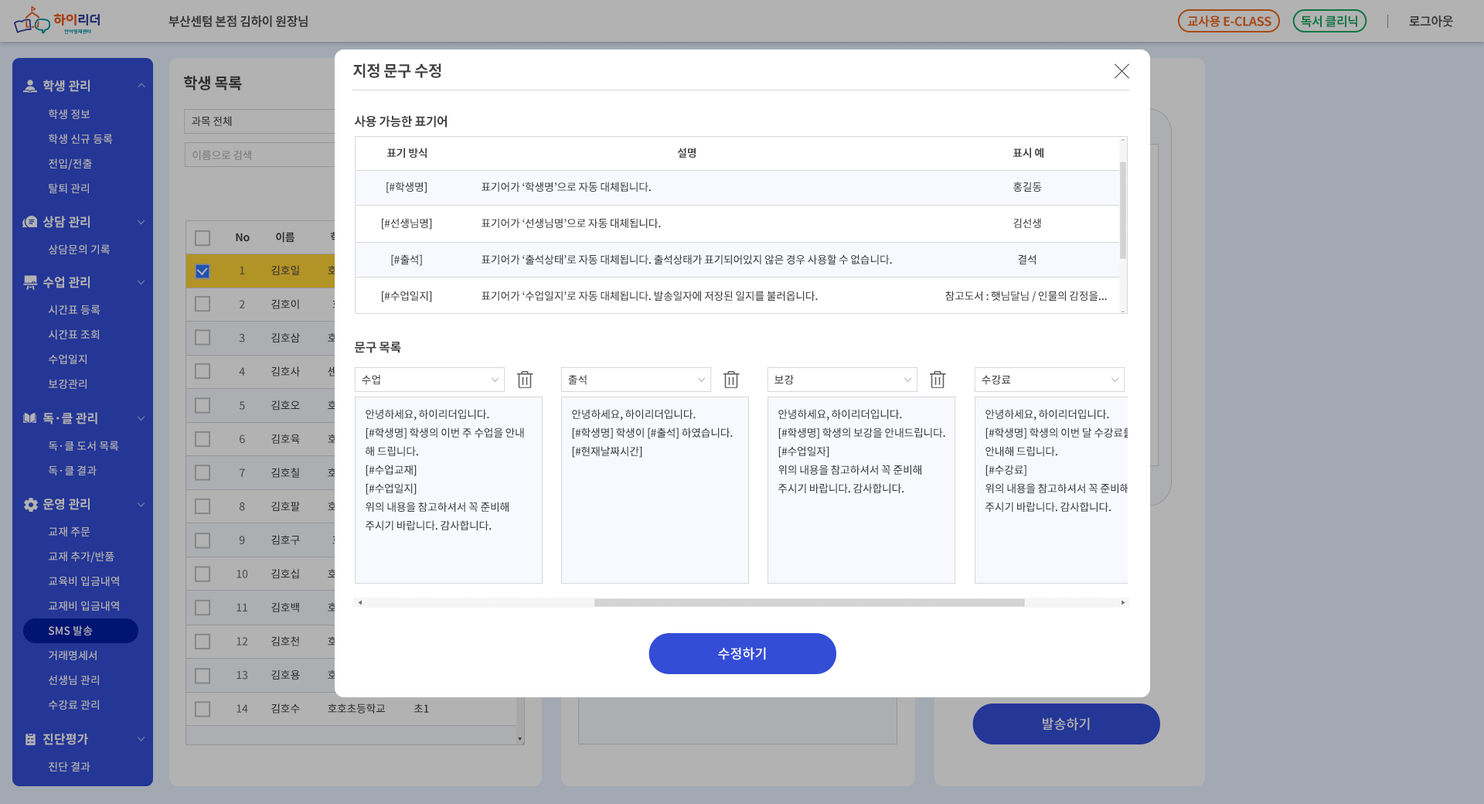
<style>
.page{position:relative;width:1484px;height:804px;background:#ffffff}
.page>*{position:absolute;margin:0}
.t1{font:12.4px "NotoSansCJKkr-Bold";letter-spacing:-0.025em;color:#4d4d4d}
.t2{font:12.4px "NotoSansCJKkr-Bold";letter-spacing:-0.025em;color:#a54a12}
.t3{font:12.4px "NotoSansCJKkr-Bold";letter-spacing:-0.025em;color:#0d7644}
.t4{font:12.4px "NotoSansCJKkr-Bold";letter-spacing:-0.025em;color:#3c3c3c}
.t5{font:15.5px "NotoSansCJKkr-Bold";letter-spacing:-0.025em;color:#404040}
.t6{font:12.4px "NotoSansCJKkr-Bold";color:#b2b2b2}
.t7{font:10.8px/24.7px "NotoSansCJKkr-Medium";color:#b2b2b2}
.t8{font:10.8px "NotoSansCJKkr-Medium";letter-spacing:-0.025em;color:#404040}
.t9{font:12.4px "NotoSansCJKkr-Bold";letter-spacing:-0.025em;color:#404040}
.t10{font:10.8px "NotoSansCJKkr-Medium";letter-spacing:-0.025em;color:#7b7b7b}
.t11{font:10.8px "NotoSansCJKkr-Bold";letter-spacing:-0.025em;color:#404040}
.t12{font:10.8px/36.3px "NotoSansCJKkr-Medium";letter-spacing:-0.025em;color:#404040}
.t13{font:10.8px "NotoSansCJKkr-Medium";color:#b2b2b2}
.t14{font:10.8px/33.7px "NotoSansCJKkr-Medium";letter-spacing:-0.025em;color:#404040}
.t15{font:10.8px "NotoSansCJKkr-Medium";color:#414040}
.t16{font:10.8px/18.5px "NotoSansCJKkr-Medium";letter-spacing:-0.025em;color:#404040}
.t17{font:13.5px "NotoSansCJKkr-Medium";color:#ffffff}
.t18{font:13.5px "NotoSansCJKkr-Medium";color:#b2b2b2}
</style>
<div class="page">
<p class="t1" style="left:168px;top:15px;width:140px;height:12px">부산센텀 본점 김하이 원장님</p>
<p class="t2" style="left:1187px;top:15px;width:84px;height:12px">교사용 E-CLASS</p>
<p class="t2" style="left:1187px;top:15px;width:84px;height:12px">교사용 E-CLASS</p>
<p class="t3" style="left:1301px;top:15px;width:56px;height:12px">독서 클리닉</p>
<p class="t3" style="left:1301px;top:15px;width:56px;height:12px">독서 클리닉</p>
<p class="t4" style="left:1409px;top:15px;width:44px;height:12px">로그아웃</p>
<p class="t4" style="left:1409px;top:15px;width:44px;height:12px">로그아웃</p>
<p class="t5" style="left:353px;top:63px;width:88px;height:15px">지정 문구 수정</p>
<p class="t5" style="left:184px;top:76px;width:58px;height:14px">학생 목록</p>
<p class="t6" style="left:43px;top:80px;width:47px;height:12px">학생 관리</p>
<p class="t7" style="left:49px;top:109px;width:64px;height:84px">학생 정보<br>학생 신규 등록<br>전입/전출<br>탈퇴 관리</p>
<p class="t8" style="left:192px;top:116px;width:40px;height:10px">과목 전체</p>
<p class="t9" style="left:354px;top:115px;width:93px;height:13px">사용 가능한 표기어</p>
<p class="t10" style="left:192px;top:150px;width:59px;height:10px">이름으로 검색</p>
<p class="t11" style="left:386px;top:148px;width:41px;height:10px">표기 방식</p>
<p class="t11" style="left:677px;top:148px;width:19px;height:10px">설명</p>
<p class="t11" style="left:1012px;top:148px;width:31px;height:10px">표시 예</p>
<p class="t12" style="left:382px;top:182px;width:50px;height:120px;text-align:center">[#학생명]<br>[#선생님명]<br>[#출석]<br>[#수업일지]</p>
<p class="t12" style="left:481px;top:182px;width:411px;height:119px">표기어가 ‘학생명’으로 자동 대체됩니다.<br>표기어가 ‘선생님명’으로 자동 대체됩니다.<br>표기어가 ‘출석상태’로 자동 대체됩니다. 출석상태가 표기되어있지 않은 경우 사용할 수 없습니다.<br>표기어가 ‘수업일지’로 자동 대체됩니다. 발송일자에 저장된 일지를 불러옵니다.</p>
<p class="t12" style="left:945px;top:182px;width:162px;height:120px;text-align:center">홍길동<br>김선생<br>결석<br>참고도서 : 햇님달님 / 인물의 감정을...</p>
<p class="t6" style="left:43px;top:216px;width:47px;height:12px">상담 관리</p>
<p class="t11" style="left:236px;top:233px;width:14px;height:9px">No</p>
<p class="t11" style="left:276px;top:232px;width:18px;height:11px">이름</p>
<p class="t13" style="left:49px;top:244px;width:61px;height:10px">상담문의 기록</p>
<p class="t14" style="left:236px;top:266px;width:12px;height:446px;text-align:center;opacity:0.8">1<br>2<br>3<br>4<br>5<br>6<br>7<br>8<br>9<br>10<br>11<br>12<br>13<br>14</p>
<p class="t14" style="left:271px;top:265px;width:29px;height:448px">김호일<br>김호이<br>김호삼<br>김호사<br>김호오<br>김호육<br>김호칠<br>김호팔<br>김호구<br>김호십<br>김호백<br>김호천<br>김호용<br>김호수</p>
<p class="t6" style="left:43px;top:276px;width:47px;height:12px">수업 관리</p>
<p class="t7" style="left:49px;top:304px;width:51px;height:85px">시간표 등록<br>시간표 조회<br>수업일지<br>보강관리</p>
<p class="t9" style="left:355px;top:342px;width:46px;height:11px">문구 목록</p>
<p class="t15" style="left:362px;top:375px;width:18px;height:10px">수업</p>
<p class="t15" style="left:568px;top:375px;width:19px;height:10px">출석</p>
<p class="t15" style="left:774px;top:375px;width:20px;height:10px">보강</p>
<p class="t15" style="left:981px;top:375px;width:30px;height:10px">수강료</p>
<p class="t6" style="left:43px;top:412px;width:54px;height:12px">독·클 관리</p>
<p class="t16" style="left:365px;top:409px;width:159px;height:122px">안녕하세요, 하이리더입니다.<br>[#학생명] 학생의 이번 주 수업을 안내<br>해 드립니다.<br>[#수업교재] <br>[#수업일지]<br>위의 내용을 참고하셔서 꼭 준비해<br>주시기 바랍니다. 감사합니다.</p>
<p class="t16" style="left:572px;top:409px;width:161px;height:48px">안녕하세요, 하이리더입니다.<br>[#학생명] 학생이 [#출석] 하였습니다.<br>[#현재날짜시간]</p>
<p class="t16" style="left:777px;top:409px;width:168px;height:85px">안녕하세요, 하이리더입니다.<br>[#학생명] 학생의 보강을 안내드립니다.<br>[#수업일자]<br>위의 내용을 참고하셔서 꼭 준비해<br>주시기 바랍니다. 감사합니다.</p>
<p class="t16" style="left:985px;top:409px;width:147px;height:103px">안녕하세요, 하이리더입니다.<br>[#학생명] 학생의 이번 달 수강료를<br>안내해 드립니다.<br>[#수강료]<br>위의 내용을 참고하셔서 꼭 준비해<br>주시기 바랍니다. 감사합니다.</p>
<p class="t7" style="left:49px;top:440px;width:70px;height:35px">독·클 도서 목록<br>독·클 결과</p>
<p class="t6" style="left:43px;top:498px;width:47px;height:12px">운영 관리</p>
<p class="t7" style="left:49px;top:526px;width:70px;height:183px">교재 주문<br>교재 추가/반품<br>교육비 입금내역<br>교재비 입금내역<br>SMS 발송<br>거래명세서<br>선생님 관리<br>수강료 관리</p>
<p class="t17" style="left:718px;top:647px;width:48px;height:13px">수정하기</p>
<p class="t18" style="left:1042px;top:717px;width:48px;height:13px">발송하기</p>
<p class="t6" style="left:43px;top:733px;width:45px;height:12px">진단평가</p>
<p class="t13" style="left:49px;top:761px;width:41px;height:10px">진단 결과</p>
</div>
